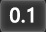
<style>
.page{position:relative;width:46px;height:32px;background:#313131}
.page>*{position:absolute;margin:0}
.t1{font:18.7px "MicrosoftYaHeiUI";color:#fffefe;font-weight:bold}
</style>
<div class="page">
<p class="t1" style="left:9px;top:7px;width:25px;height:16px">0.1</p>
</div>
